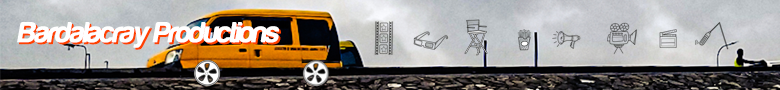
<style>
.page{position:relative;width:780px;height:90px}
.page>*{position:absolute;margin:0}
.t1{font:29.8px "Harabara";letter-spacing:-0.055em;color:#ffffff;font-weight:bold;font-style:italic}
.t2{font:29.8px "Harabara";letter-spacing:-0.055em;font-weight:bold;font-style:italic}
</style>
<div class="page">
<p class="t1" style="left:17px;top:22px;width:262px;height:26px">Bardalacray Productions</p>
<p class="t2" style="left:19px;top:23px;width:262px;height:27px">Bardalacray Productions</p>
</div>
